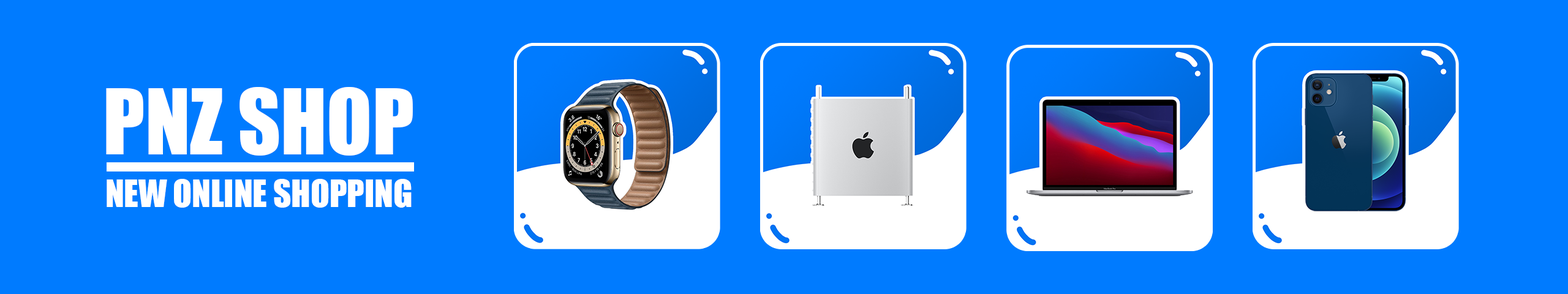
<style>
.page{position:relative;width:1568px;height:294px;background:#007bff}
.page>*{position:absolute;margin:0}
.t1{font:83.2px "Impact";color:#ffffff}
.t2{font:34.7px "Impact";color:#ffffff}
</style>
<div class="page">
<p class="t1" style="left:106px;top:87px;width:307px;height:69px">PNZ SHOP</p>
<p class="t2" style="left:107px;top:179px;width:305px;height:29px">NEW ONLINE SHOPPING</p>
</div>
